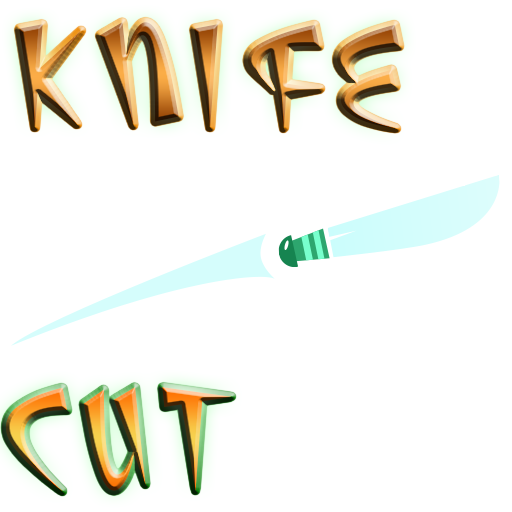
<style>
.page{position:relative;width:512px;height:512px;background:#ffffff}
.page>*{position:absolute;margin:0}
.t1{font:128.5px "Atomic-Plain";letter-spacing:0.08em}
</style>
<div class="page">
<p class="t1" style="left:19px;top:24px;width:381px;height:105px">K  FE</p>
<p class="t1" style="left:99px;top:22px;width:80px;height:104px">N</p>
<p class="t1" style="left:194px;top:24px;width:24px;height:104px">I</p>
<p class="t1" style="left:5px;top:387px;width:227px;height:105px">CUT</p>
</div>
